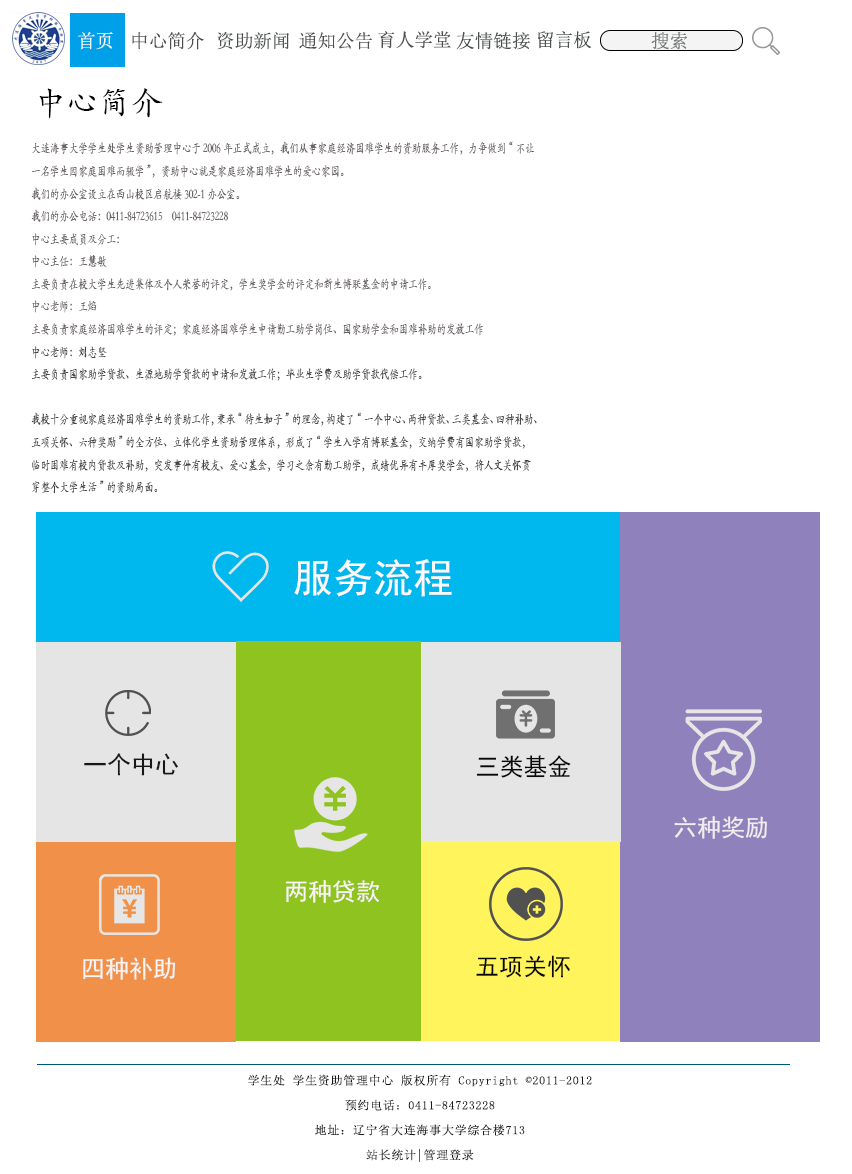
<style>
.page{position:relative;width:852px;height:1174px;background:#ffffff}
.page>*{position:absolute;margin:0}
.t1{font:18.7px "SimSun";color:#f6fbfb}
.t2{font:18.7px "SimSun";color:#4d4f4f}
.t3{font:18.7px "SimSun";color:#757878}
.t4{font:32px "STKaiti";color:#000000}
.t5{font:12.9px "STKaiti";color:#696363;scale:0.73 1}
.t6{font:12.9px "STKaiti";color:#474545;scale:0.73 1}
.t7{font:40px "SimHei";color:#fcfafa}
.t8{font:24px "SimHei";color:#181717}
.t9{font:24px "SimHei";color:#080808}
.t10{font:24px "SimHei";color:#f2eded}
.t11{font:24px "SimHei";color:#faf5f5}
.t12{font:24px "SimHei";color:#f6f4f4}
.t13{font:24px "SimHei";color:#070707}
.t14{font:12px/24.9px "SimSun";letter-spacing:0.06em;color:#1b1b1b}
</style>
<div class="page">
<p class="t1" style="left:78px;top:32px;width:35px;height:18px">首页</p>
<p class="t2" style="left:132px;top:31px;width:72px;height:19px">中心简介</p>
<p class="t2" style="left:217px;top:32px;width:72px;height:18px">资助新闻</p>
<p class="t2" style="left:299px;top:32px;width:74px;height:18px">通知公告</p>
<p class="t2" style="left:378px;top:31px;width:73px;height:18px">育人学堂</p>
<p class="t2" style="left:456px;top:31px;width:74px;height:19px">友情链接</p>
<p class="t2" style="left:538px;top:31px;width:54px;height:18px">留言板</p>
<p class="t3" style="left:651px;top:31px;width:37px;height:19px">搜索</p>
<p class="t4" style="left:39px;top:88px;width:124px;height:31px">中心简介</p>
<p class="t5" style="left:31px;top:141px;width:506px;height:353px">大连海事大学学生处学生资助管理中心于2006年正式成立，我们从事家庭经济困难学生的资助服务工作，力争做到“不让一名学生因家庭困难而辍学”，资助中心就是家庭经济困难学生的爱心家园。<br>我们的办公室设立在西山校区启航楼302-1办公室。<br>我们的办公电话：0411-84723615    0411-84723228<br>中心主要成员及分工：<br>中心主任：王慧敏<br>主要负责在校大学生先进集体及个人荣誉的评定，学生奖学金的评定和新生博联基金的申请工作。<br>中心老师：王焰<br>主要负责家庭经济困难学生的评定；家庭经济困难学生申请勤工助学岗位、国家助学金和困难补助的发放工作<span class="t6"><br>中心老师：刘志坚<br>主要负责国家助学贷款、生源地助学贷款的申请和发放工作；毕业生学费及助学贷款代偿工作。<br><br>我校十分重视家庭经济困难学生的资助工作，秉承“待生如子”的理念，构建了 “一个中心、两种贷款、三类基金、四种补助、五项关怀、六种奖励”的全方位、立体化学生资助管理体系，形成了“学生入学有博联基金，交纳学费有国家助学贷款，临时困难有校内贷款及补助，突发事件有校友、爱心基金，学习之余有勤工助学，成绩优异有丰厚奖学金，将人文关怀贯穿整个大学生活”的资助局面。</span></p>
<p class="t7" style="left:294px;top:559px;width:158px;height:38px">服务流程</p>
<p class="t8" style="left:84px;top:753px;width:95px;height:23px">一个中心</p>
<p class="t9" style="left:476px;top:755px;width:95px;height:23px">三类基金</p>
<p class="t10" style="left:674px;top:816px;width:93px;height:23px">六种奖励</p>
<p class="t11" style="left:285px;top:880px;width:95px;height:23px">两种贷款</p>
<p class="t12" style="left:83px;top:957px;width:93px;height:23px">四种补助</p>
<p class="t13" style="left:476px;top:955px;width:94px;height:23px">五项关怀</p>
<p class="t14" style="left:248px;top:1074px;width:344px;height:87px;text-align:center">学生处 学生资助管理中心 版权所有 Copyright ©2011-2012<br>预约电话：0411-84723228<br>地址：辽宁省大连海事大学综合楼713 <br>站长统计 管理登录</p>
</div>
